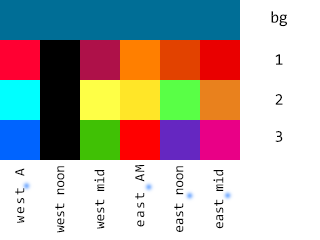
<style>
.page{position:relative;width:320px;height:240px;background:#ffffff}
.page>*{position:absolute;margin:0}
.t1{font:16.5px "Consolas";letter-spacing:-0.02em;color:#000000}
.t2{font:14.2px "Consolas";letter-spacing:0.12em;color:#000000}
.t3{font:14.2px "Consolas";letter-spacing:-0.02em;color:#000000}
.t4{font:14.2px "Consolas";letter-spacing:0.1em;color:#000000}
</style>
<div class="page">
<p class="t1" style="left:271px;top:11px;width:16px;height:16px">bg</p>
<p class="t1" style="left:275px;top:54px;width:8px;height:11px">1</p>
<p class="t1" style="left:275px;top:94px;width:8px;height:11px">2</p>
<p class="t1" style="left:275px;top:131px;width:8px;height:11px">3</p>
<p class="t2" style="left:15px;top:168px;width:10px;height:55px;rotate:-90deg">west A</p>
<p class="t3" style="left:55px;top:166px;width:10px;height:67px;rotate:-90deg">west noon</p>
<p class="t3" style="left:94px;top:170px;width:11px;height:59px;rotate:-90deg">west mid</p>
<p class="t4" style="left:135px;top:165px;width:10px;height:62px;rotate:-90deg">east AM</p>
<p class="t3" style="left:174px;top:166px;width:10px;height:66px;rotate:-90deg">east noon</p>
<p class="t3" style="left:213px;top:170px;width:11px;height:59px;rotate:-90deg">east mid</p>
</div>
